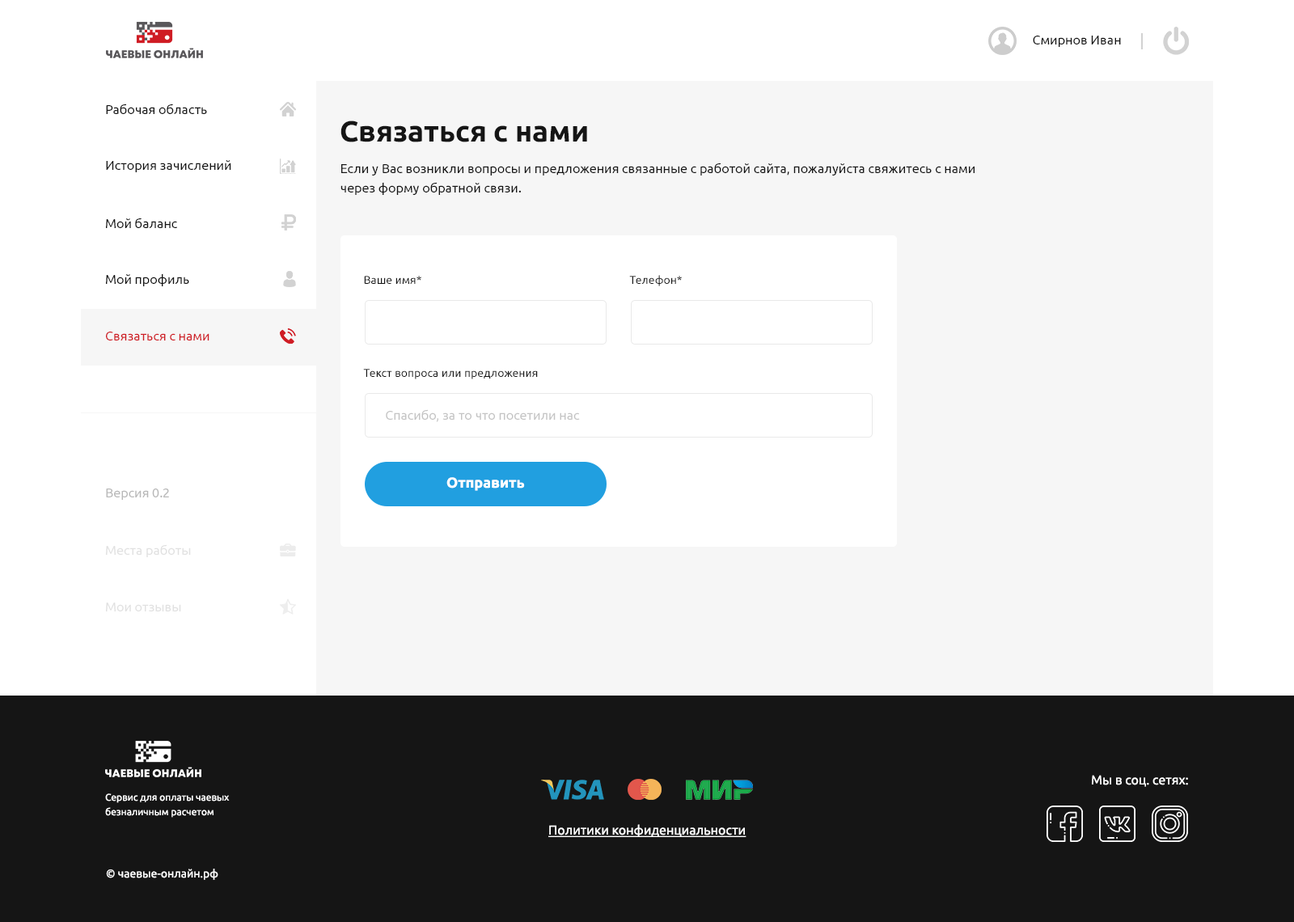
<style>
.page{position:relative;width:1294px;height:922px;background:#ffffff}
.page>*{position:absolute;margin:0}
.t1{font:12.9px "Ubuntu-Regular";color:#151515}
.t2{font:29.1px "Ubuntu-Bold";color:#151515}
.t3{font:12.9px/9.7px "Ubuntu-Regular";color:#151515}
.t4{font:11.3px "Ubuntu-Regular";color:#151515}
.t5{font:12.9px "Ubuntu-Regular";color:#cf1c24}
.t6{font:12.9px "Ubuntu-Regular";color:#c4c4c4}
.t7{font:14.6px "Ubuntu-Bold";color:#ffffff}
.t8{font:12.9px "Ubuntu-Regular";color:#b8b8b8}
.t9{font:12.9px "Ubuntu-Regular";color:#e1e1e1}
.t10{font:12.9px "Ubuntu-Regular";color:#ffffff}
.t11{font:9.7px/7.3px "Ubuntu-Regular";color:#ffffff}
.t12{font:12.9px "Ubuntu-Regular";color:#ffffff;text-decoration:underline}
.t13{font:11.3px "Ubuntu-Regular";color:#ffffff}
</style>
<div class="page">
<p class="t1" style="left:1033px;top:36px;width:88px;height:11px">Смирнов Иван</p>
<p class="t1" style="left:106px;top:103px;width:101px;height:11px">Рабочая область</p>
<p class="t2" style="left:340px;top:120px;width:247px;height:22px">Связаться с нами</p>
<p class="t1" style="left:106px;top:160px;width:125px;height:12px">История зачислений</p>
<p class="t3" style="left:340px;top:163px;width:634px;height:32px">Если у Вас возникли вопросы и предложения связанные с работой сайта, пожалуйста свяжитесь с нами<br><br>через форму обратной связи.</p>
<p class="t1" style="left:106px;top:217px;width:71px;height:11px">Мой баланс</p>
<p class="t1" style="left:106px;top:273px;width:83px;height:13px">Мой профиль</p>
<p class="t4" style="left:364px;top:276px;width:57px;height:8px">Ваше имя*</p>
<p class="t4" style="left:629px;top:275px;width:53px;height:11px">Телефон*</p>
<p class="t5" style="left:106px;top:332px;width:103px;height:8px">Связаться с нами</p>
<p class="t4" style="left:363px;top:369px;width:175px;height:10px">Текст вопроса или предложения</p>
<p class="t6" style="left:386px;top:409px;width:194px;height:13px">Спасибо, за то что посетили нас</p>
<p class="t7" style="left:446px;top:477px;width:79px;height:14px">Отправить</p>
<p class="t8" style="left:106px;top:488px;width:63px;height:12px">Версия 0.2</p>
<p class="t9" style="left:106px;top:544px;width:85px;height:13px">Места работы</p>
<p class="t9" style="left:106px;top:602px;width:75px;height:9px">Мои отзывы</p>
<p class="t10" style="left:1092px;top:775px;width:96px;height:12px">Мы в соц. сетях:</p>
<p class="t11" style="left:105px;top:793px;width:125px;height:24px">Сервис для оплаты чаевых<br><br>безналичным расчетом</p>
<p class="t12" style="left:548px;top:824px;width:198px;height:13px">Политики конфиденциальности</p>
<p class="t13" style="left:106px;top:868px;width:112px;height:12px">© чаевые-онлайн.рф</p>
</div>
